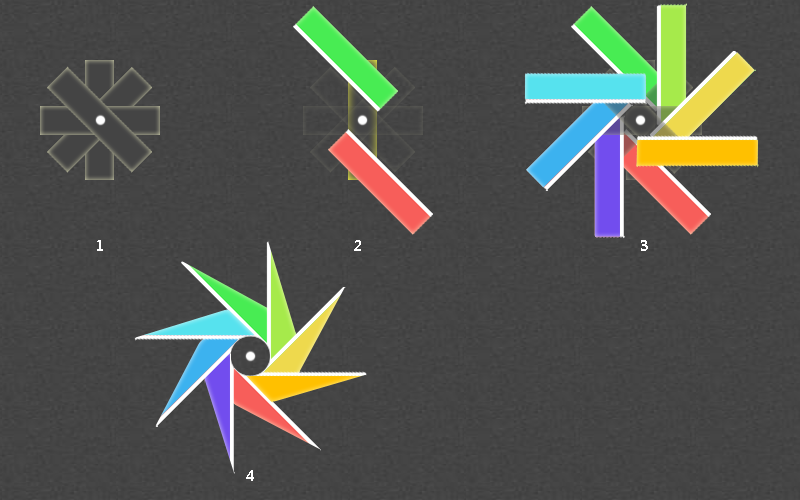
<style>
.page{position:relative;width:800px;height:500px}
.page>*{position:absolute;margin:0}
.t1{font:14px "MicrosoftYaHei-Bold";letter-spacing:0.04em;color:#ffffff}
</style>
<div class="page">
<p class="t1" style="left:97px;top:240px;width:6px;height:11px">1</p>
<p class="t1" style="left:354px;top:240px;width:7px;height:11px">2</p>
<p class="t1" style="left:641px;top:240px;width:7px;height:11px">3</p>
<p class="t1" style="left:246px;top:470px;width:8px;height:11px">4</p>
</div>
